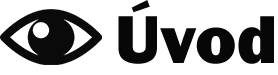
<style>
.page{position:relative;width:278px;height:75px;background:#ffffff}
.page>*{position:absolute;margin:0}
.t1{font:70px "FranklinGothic-Heavy";color:#0d0d0d}
</style>
<div class="page">
<p class="t1" style="left:118px;top:0px;width:156px;height:64px">Úvod</p>
</div>
